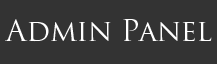
<style>
.page{position:relative;width:217px;height:64px;background:#333333}
.page>*{position:absolute;margin:0}
.t1{font:29.2px "TrajanPro-Regular";color:#ffffff}
</style>
<div class="page">
<p class="t1" style="left:5px;top:19px;width:207px;height:23px">Admin Panel</p>
</div>
